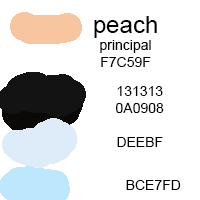
<style>
.page{position:relative;width:200px;height:200px;background:#ffffff}
.page>*{position:absolute;margin:0}
.t1{font:14px "ArialMT";color:#000000}
.t2{font:24px "ArialMT";color:#000000}
</style>
<div class="page">
<p class="t1" style="left:94px;top:16px;width:63px;height:51px;text-align:center"><span class="t2">peach<br></span>principal<br>F7C59F</p>
<p class="t1" style="left:116px;top:86px;width:48px;height:27px;text-align:center">131313<br>0A0908</p>
<p class="t1" style="left:117px;top:137px;width:46px;height:10px">DEEBF9</p>
<p class="t1" style="left:126px;top:180px;width:55px;height:10px">BCE7FD</p>
</div>
